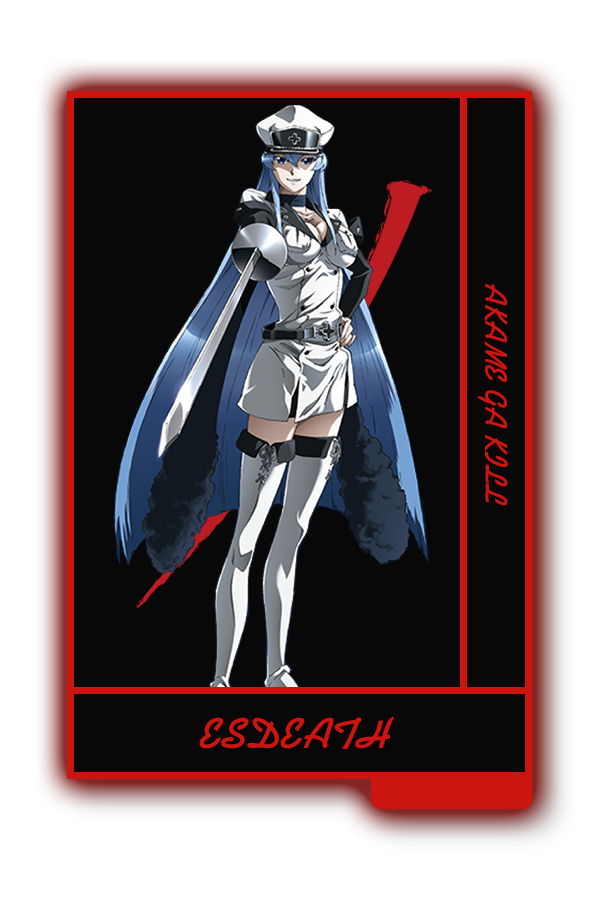
<style>
.page{position:relative;width:600px;height:900px;background:#080808}
.page>*{position:absolute;margin:0}
.t1{font:31.2px "Alako-Bold";color:#cb1511}
.t2{font:43.2px "Alako-Bold";color:#cb1511}
</style>
<div class="page">
<p class="t1" style="left:477px;top:283px;width:31px;height:223px;rotate:90deg">AKAME GA KILL</p>
<p class="t2" style="left:199px;top:716px;width:195px;height:33px">ESDEATH</p>
</div>
